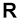
<style>
.page{position:relative;width:20px;height:20px;background:#ffffff}
.page>*{position:absolute;margin:0}
.t1{font:20.8px "Arial-BoldMT";color:#000000}
</style>
<div class="page">
<p class="t1" style="left:3px;top:2px;width:14px;height:16px">R</p>
</div>
